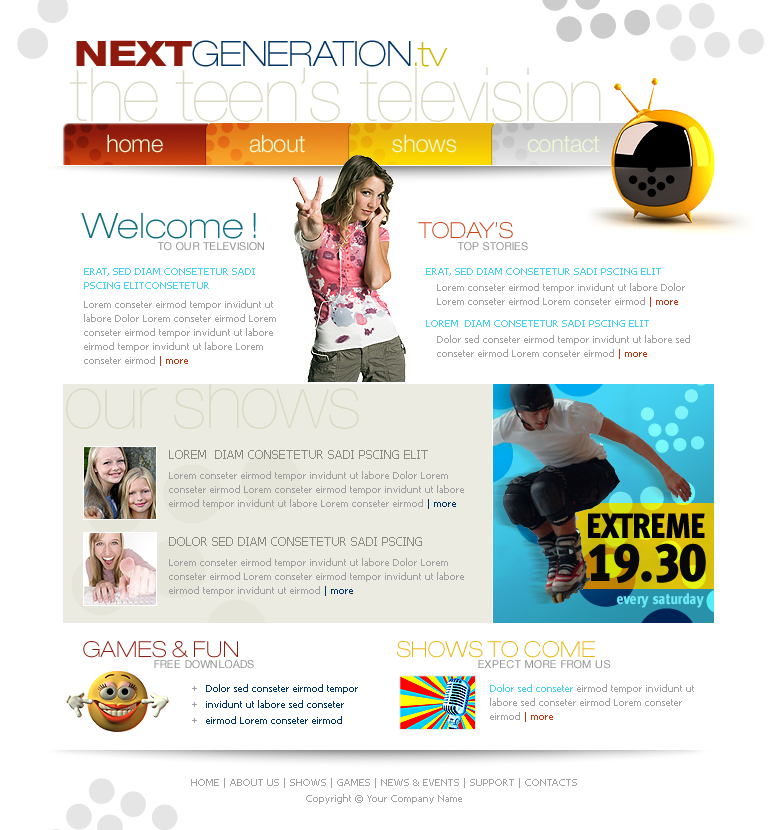
<style>
.page{position:relative;width:775px;height:830px;background:#ffffff}
.page>*{position:absolute;margin:0}
.t1{font:150.2px "MetaCondBold-Expert";color:#cccccc}
.t2{font:150.2px "MetaCondBold-Expert";color:#e5e5e5}
.t3{font:35px "HelveticaNeueLTPro-ThEx";letter-spacing:-0.025em;color:#003365}
.t4{font:35px "HelveticaNeueLTPro-HvEx";letter-spacing:-0.025em;color:#8d1a0d}
.t5{font:35px "HelveticaNeueLTPro-ThEx";letter-spacing:-0.025em;color:#cbb90a}
.t6{font:75px "HelveticaNeueLTPro-UltLt";letter-spacing:-0.025em;color:#dad9c4}
.t7{font:24px "HelveticaNeueLTPro-Lt";letter-spacing:-0.025em;color:#eefad4}
.t8{font:35px "HelveticaNeueLTPro-ThEx";color:#0d6f80}
.t9{font:22px "HelveticaNeueLTPro-ThEx";color:#c93f0f}
.t10{font:11px "HelveticaNeueLTPro-Roman";color:#909090}
.t11{font:10px/14px "Tahoma";color:#44d3f1}
.t12{font:10px "Tahoma";color:#44d3f1}
.t13{font:10px/14px "Tahoma";color:#a0a0a0}
.t14{font:10px/14px "Tahoma";color:#bd380e}
.t15{font:78.2px "MetaCondBold-Expert";color:#7cf6fa}
.t16{font:12px "Tahoma";color:#8a8a82}
.t17{font:10px/14px "Tahoma";color:#003367}
.t18{font:35px "MetaCondBlackLF-Roman";letter-spacing:-0.025em;color:#000000}
.t19{font:55px "MetaCondBlackLF-Roman";letter-spacing:-0.02em;color:#080808}
.t20{font:15px "MetaCondBlackLF-Roman";color:#6ceaf4}
.t21{font:22px "HelveticaNeueLTPro-ThEx";color:#8c1a0d}
.t22{font:22px "HelveticaNeueLTPro-ThEx";color:#e9b50e}
.t23{font:10px/16px "Tahoma";color:#003367}
.t24{font:10px/16px "Tahoma";color:#a0a0a0}
</style>
<div class="page">
<p class="t1" style="left:542px;top:0px;width:108px;height:42px;rotate:-105deg">q</p>
<p class="t2" style="left:656px;top:3px;width:108px;height:58px;rotate:-105deg">q</p>
<p class="t3" style="left:76px;top:40px;width:372px;height:27px"><span class="t4">NEXT</span>GENERATION<span class="t5">.tv</span></p>
<p class="t6" style="left:69px;top:67px;width:532px;height:55px">the teen’s television</p>
<p class="t7" style="left:107px;top:134px;width:56px;height:19px">home</p>
<p class="t7" style="left:249px;top:134px;width:56px;height:19px">about</p>
<p class="t7" style="left:392px;top:134px;width:65px;height:19px">shows</p>
<p class="t7" style="left:527px;top:136px;width:73px;height:17px">contact</p>
<p class="t8" style="left:81px;top:213px;width:175px;height:26px">Welcome !</p>
<p class="t9" style="left:418px;top:222px;width:95px;height:17px">TODAY’S</p>
<p class="t10" style="left:157px;top:242px;width:107px;height:9px">TO OUR TELEVISION</p>
<p class="t10" style="left:457px;top:242px;width:71px;height:9px">TOP STORIES</p>
<p class="t11" style="left:84px;top:268px;width:171px;height:21px">ERAT, SED DIAM CONSETETUR SADI PSCING ELITCONSETETUR</p>
<p class="t12" style="left:426px;top:268px;width:235px;height:8px">ERAT, SED DIAM CONSETETUR SADI PSCING ELIT</p>
<p class="t13" style="left:437px;top:283px;width:248px;height:24px">Lorem conseter eirmod tempor invidunt ut labore Dolor Lorem conseter eirmod Lorem conseter eirmod <span class="t14">| more</span></p>
<p class="t13" style="left:84px;top:300px;width:192px;height:66px">Lorem conseter eirmod tempor invidunt ut labore Dolor Lorem conseter eirmod Lorem conseter eirmod tempor invidunt ut labore eirmod tempor invidunt ut labore Lorem conseter eirmod <span class="t14">| more</span></p>
<p class="t12" style="left:426px;top:320px;width:223px;height:7px">LOREM  DIAM CONSETETUR SADI PSCING ELIT</p>
<p class="t13" style="left:437px;top:335px;width:253px;height:24px">Dolor sed conseter eirmod tempor invidunt ut labore sed conseter eirmod Lorem conseter eirmod <span class="t14">| more</span></p>
<p class="t15" style="left:640px;top:372px;width:68px;height:81px;rotate:-105deg">q</p>
<p class="t16" style="left:169px;top:450px;width:259px;height:9px">LOREM  DIAM CONSETETUR SADI PSCING ELIT</p>
<p class="t13" style="left:169px;top:471px;width:295px;height:38px">Lorem conseter eirmod tempor invidunt ut labore Dolor Lorem conseter eirmod Lorem conseter eirmod tempor invidunt ut labore eirmod tempor invidunt ut labore Lorem conseter eirmod <span class="t17">| more</span></p>
<p class="t18" style="left:588px;top:513px;width:117px;height:25px">EXTREME</p>
<p class="t16" style="left:169px;top:537px;width:253px;height:9px">DOLOR SED DIAM CONSETETUR SADI PSCING</p>
<p class="t19" style="left:589px;top:543px;width:117px;height:40px">19.30</p>
<p class="t13" style="left:169px;top:558px;width:295px;height:38px">Lorem conseter eirmod tempor invidunt ut labore Dolor Lorem conseter eirmod Lorem conseter eirmod tempor invidunt ut labore eirmod tempor invidunt ut eirmod <span class="t17">| more</span></p>
<p class="t20" style="left:617px;top:593px;width:87px;height:15px">every saturday</p>
<p class="t21" style="left:83px;top:641px;width:155px;height:17px">GAMES &amp; FUN</p>
<p class="t22" style="left:397px;top:641px;width:198px;height:17px">SHOWS TO COME</p>
<p class="t10" style="left:154px;top:660px;width:100px;height:9px">FREE DOWNLOADS</p>
<p class="t10" style="left:478px;top:660px;width:133px;height:9px">EXPECT MORE FROM US</p>
<p class="t23" style="left:206px;top:684px;width:152px;height:40px">Dolor sed conseter eirmod tempor invidunt ut labore sed conseter eirmod Lorem conseter eirmod</p>
<p class="t13" style="left:490px;top:684px;width:204px;height:38px"><span class="t11">Dolor sed conseter </span>eirmod tempor invidunt ut labore sed conseter eirmod Lorem conseter eirmod <span class="t14">| more</span></p>
<p class="t24" style="left:191px;top:778px;width:386px;height:26px;text-align:center">HOME | ABOUT US | SHOWS | GAMES | NEWS &amp; EVENTS | SUPPORT | CONTACTS<br>Copyright © Your Company Name</p>
</div>
